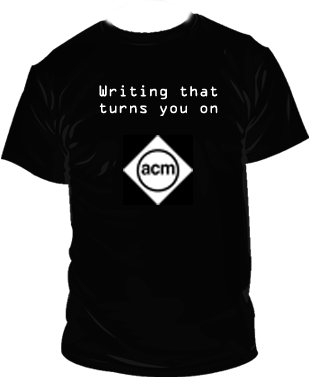
<style>
.page{position:relative;width:316px;height:385px;background:#ffffff}
.page>*{position:absolute;margin:0}
.t1{font:14px "OCRAStd";color:#ffffff}
</style>
<div class="page">
<p class="t1" style="left:99px;top:85px;width:119px;height:31px;text-align:center">Writing that turns you on</p>
</div>
